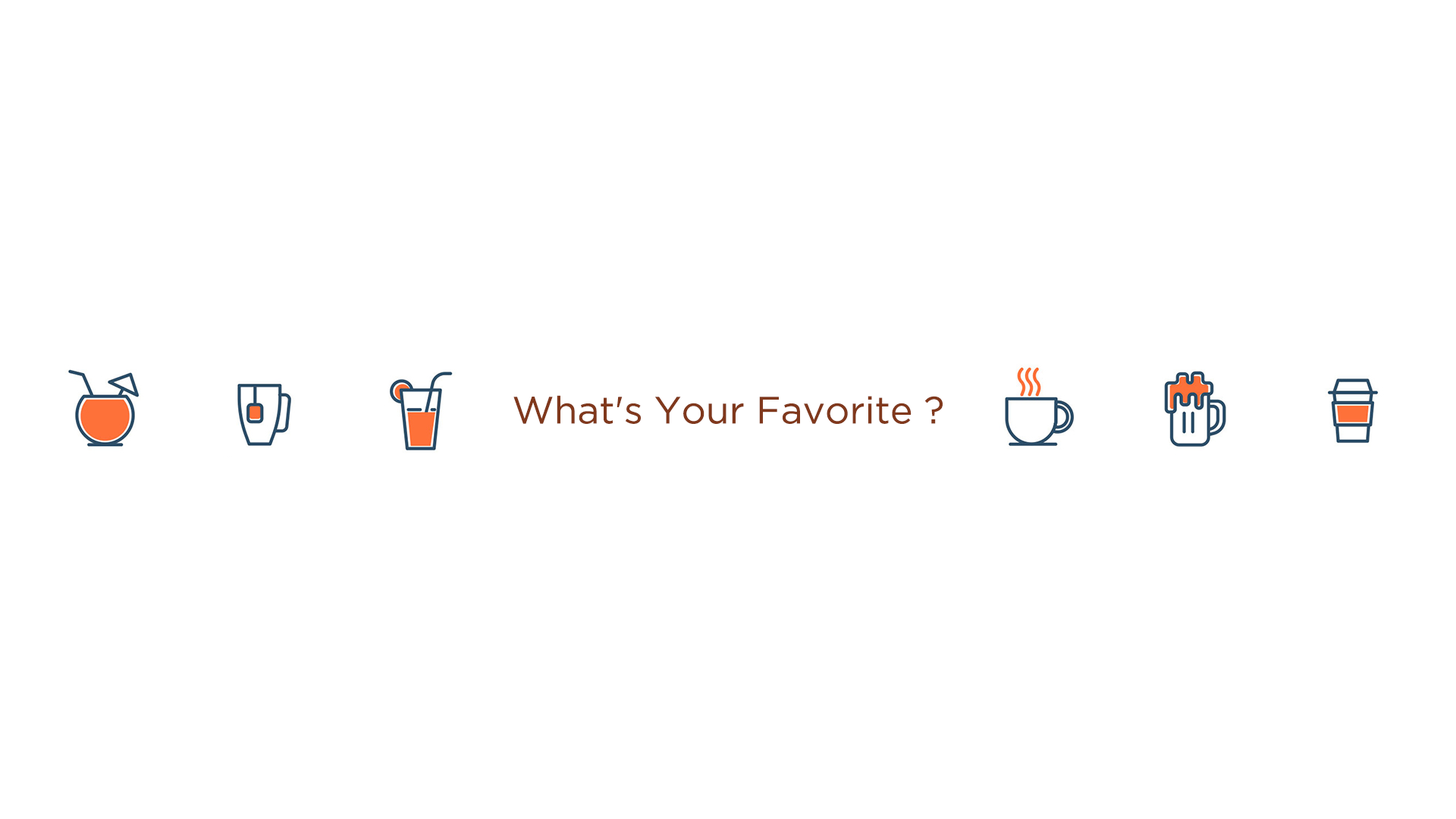
<style>
.page{position:relative;width:1456px;height:819px;background:#ffffff}
.page>*{position:absolute;margin:0}
.t1{font:37.9px "GothamPro";color:#80381c}
</style>
<div class="page">
<p class="t1" style="left:513px;top:395px;width:430px;height:29px">What's Your Favorite ?</p>
</div>
